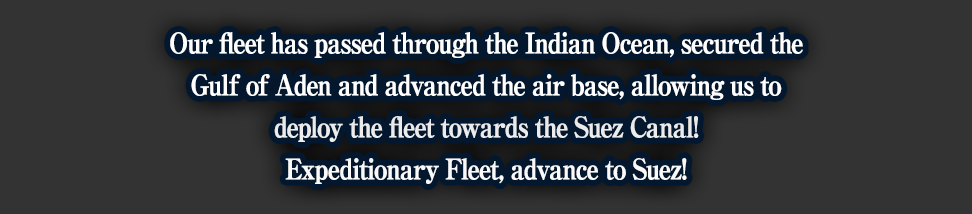
<style>
.page{position:relative;width:972px;height:214px;background:#333333}
.page>*{position:absolute;margin:0}
.t1{font:28px/42px "RyuminPro-ExBold";letter-spacing:-0.08em;color:#ffffff;font-weight:bold;scale:0.9 1}
</style>
<div class="page">
<p class="t1" style="left:170px;top:32px;width:633px;height:152px;text-align:center">Our fleet has passed through the Indian Ocean, secured the<br>Gulf of Aden and advanced the air base, allowing us to<br>deploy the fleet towards the Suez Canal!<br>Expeditionary Fleet, advance to Suez!</p>
</div>
